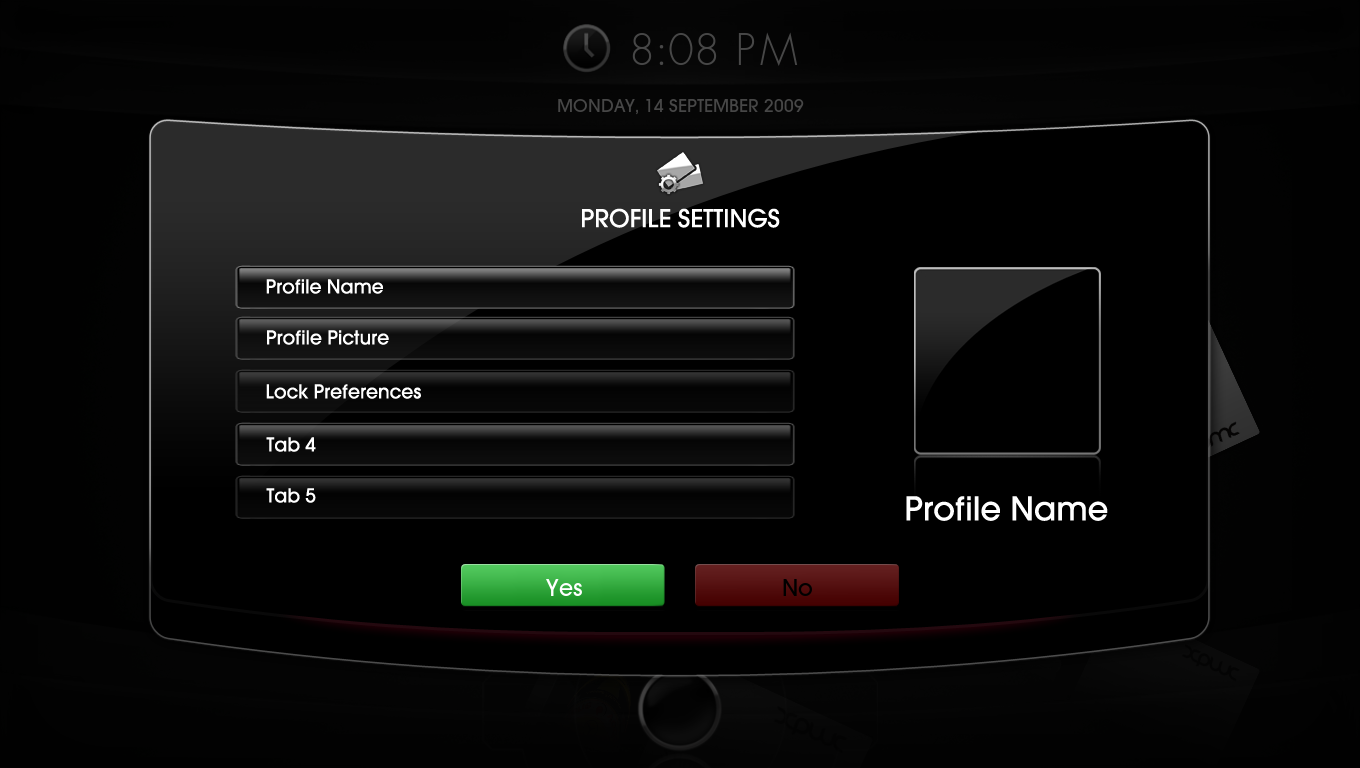
<style>
.page{position:relative;width:1360px;height:768px;background:#000000}
.page>*{position:absolute;margin:0}
.t1{font:27px "AvantGardeMdITC";color:#ffffff}
.t2{font:20.9px "AvantGardeMdITC";color:#ffffff}
.t3{font:36px "AvantGardeMdITC";color:#ffffff}
</style>
<div class="page">
<p class="t1" style="left:582px;top:208px;width:198px;height:20px">PROFILE SETTINGS</p>
<p class="t2" style="left:266px;top:279px;width:117px;height:15px">Profile Name</p>
<p class="t2" style="left:267px;top:330px;width:122px;height:15px">Profile Picture</p>
<p class="t2" style="left:266px;top:384px;width:155px;height:15px">Lock Preferences</p>
<p class="t2" style="left:266px;top:437px;width:50px;height:15px">Tab 4</p>
<p class="t2" style="left:266px;top:488px;width:50px;height:15px">Tab 5</p>
<p class="t3" style="left:906px;top:496px;width:202px;height:25px">Profile Name</p>
</div>
